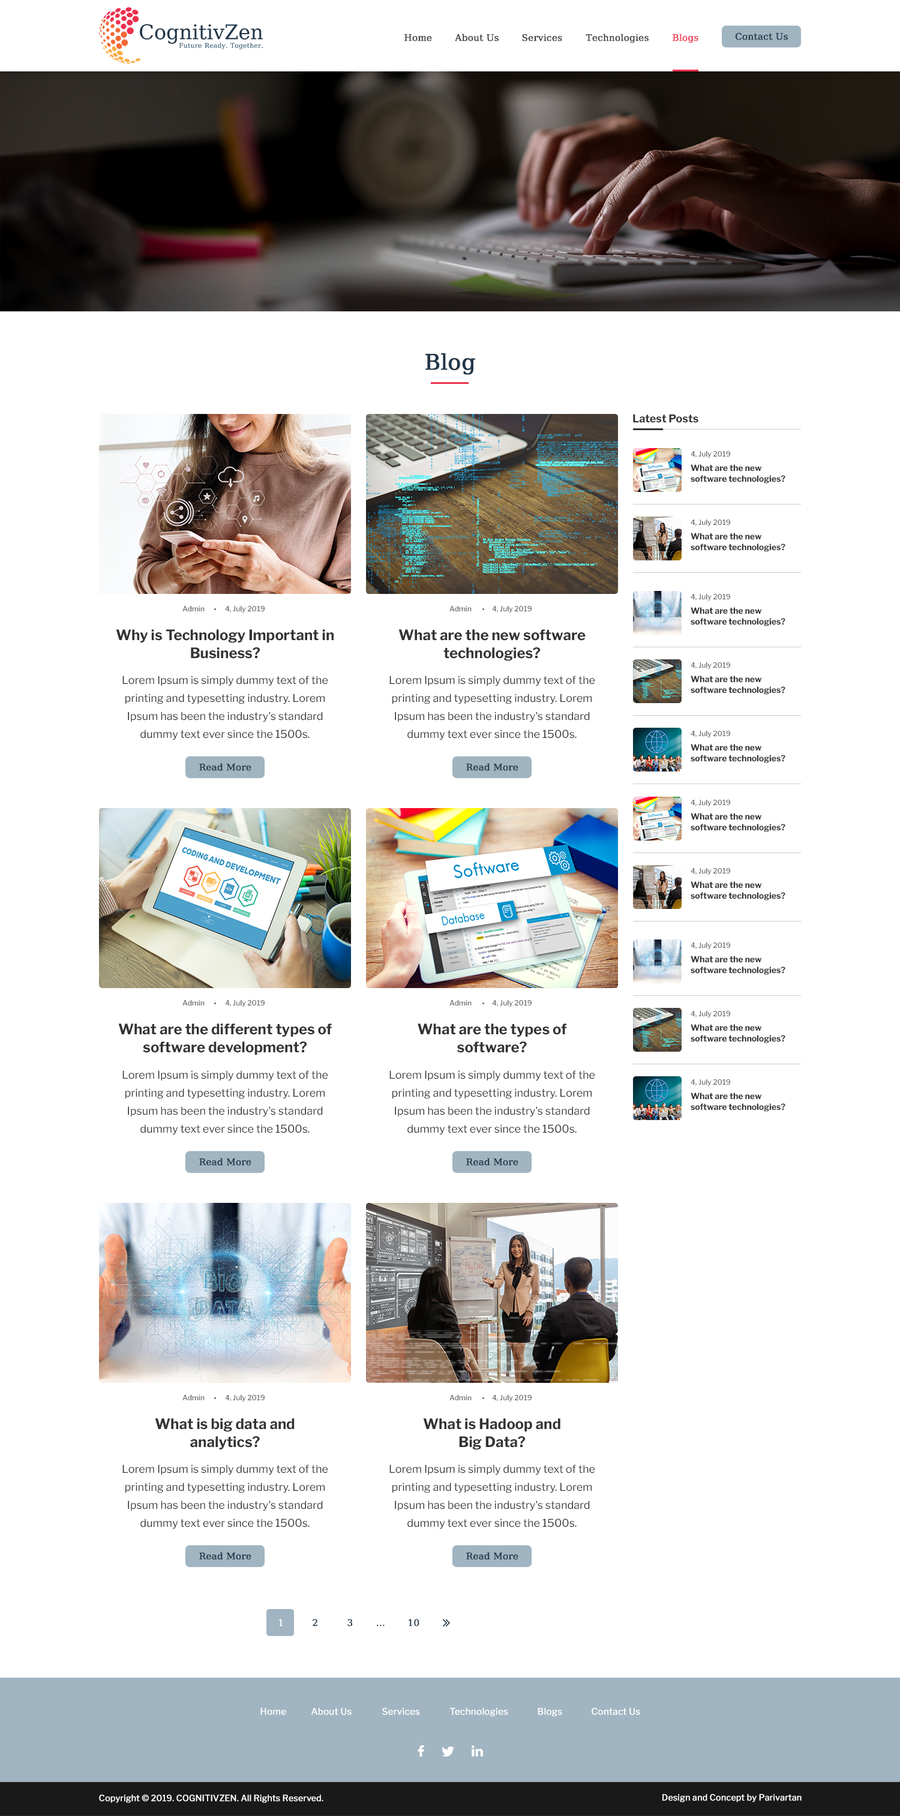
<style>
.page{position:relative;width:900px;height:1816px;background:#ffffff}
.page>*{position:absolute;margin:0}
.t1{font:9px "DejaVuMathTeXGyre-Regular";color:#3c3c3c;font-weight:bold}
.t2{font:9px "DejaVuMathTeXGyre-Regular";color:#ee334e;font-weight:bold}
.t3{font:9px "DejaVuMathTeXGyre-Regular";color:#223749;font-weight:bold}
.t4{font:21.6px "DejaVuMathTeXGyre-Regular";color:#223749;font-weight:bold}
.t5{font:10.8px "LibreFranklin-Bold";color:#333333}
.t6{font:7.2px "LibreFranklin-Medium";color:#666666}
.t7{font:8.4px/10.8px "LibreFranklin-Bold";color:#333333}
.t8{font:14.4px/18px "LibreFranklin-Bold";color:#333333}
.t9{font:10.8px/18px "LibreFranklin-Regular";color:#333333}
.t10{font:9px "DejaVuMathTeXGyre-Regular";color:#ffffff;font-weight:bold}
.t11{font:9px "LibreFranklin-Regular";color:#ffffff;font-weight:bold}
.t12{font:8.4px "LibreFranklin-Regular";color:#ffffff;font-weight:bold}
</style>
<div class="page">
<p class="t1" style="left:404px;top:34px;width:28px;height:7px">Home</p>
<p class="t1" style="left:455px;top:34px;width:44px;height:7px">About Us</p>
<p class="t1" style="left:522px;top:34px;width:40px;height:7px">Services</p>
<p class="t1" style="left:586px;top:34px;width:63px;height:9px">Technologies</p>
<p class="t2" style="left:673px;top:34px;width:25px;height:9px">Blogs</p>
<p class="t3" style="left:735px;top:32px;width:53px;height:8px">Contact Us</p>
<p class="t4" style="left:425px;top:353px;width:50px;height:22px">Blog</p>
<p class="t5" style="left:633px;top:414px;width:65px;height:9px">Latest Posts</p>
<p class="t6" style="left:691px;top:451px;width:39px;height:7px">4, July 2019</p>
<p class="t7" style="left:691px;top:464px;width:94px;height:20px">What are the new software technologies?</p>
<p class="t6" style="left:691px;top:520px;width:39px;height:6px">4, July 2019</p>
<p class="t7" style="left:691px;top:533px;width:94px;height:19px">What are the new software technologies?</p>
<p class="t6" style="left:182px;top:606px;width:23px;height:5px">Admin</p>
<p class="t6" style="left:225px;top:606px;width:40px;height:7px">4, July 2019</p>
<p class="t6" style="left:449px;top:606px;width:23px;height:5px">Admin</p>
<p class="t6" style="left:492px;top:606px;width:40px;height:7px">4, July 2019</p>
<p class="t6" style="left:691px;top:594px;width:39px;height:7px">4, July 2019</p>
<p class="t7" style="left:691px;top:607px;width:94px;height:19px">What are the new software technologies?</p>
<p class="t8" style="left:116px;top:629px;width:218px;height:30px;text-align:center">Why is Technology Important in Business?</p>
<p class="t8" style="left:398px;top:629px;width:188px;height:32px;text-align:center">What are the new software technologies?</p>
<p class="t6" style="left:691px;top:662px;width:39px;height:7px">4, July 2019</p>
<p class="t9" style="left:122px;top:676px;width:206px;height:64px;text-align:center">Lorem Ipsum is simply dummy text of the printing and typesetting industry. Lorem Ipsum has been the industry's standard dummy text ever since the 1500s.</p>
<p class="t9" style="left:389px;top:676px;width:206px;height:64px;text-align:center">Lorem Ipsum is simply dummy text of the printing and typesetting industry. Lorem Ipsum has been the industry's standard dummy text ever since the 1500s.</p>
<p class="t7" style="left:691px;top:676px;width:94px;height:19px">What are the new software technologies?</p>
<p class="t6" style="left:691px;top:731px;width:39px;height:6px">4, July 2019</p>
<p class="t7" style="left:691px;top:744px;width:94px;height:19px">What are the new software technologies?</p>
<p class="t3" style="left:199px;top:763px;width:52px;height:8px">Read More</p>
<p class="t3" style="left:466px;top:763px;width:52px;height:8px">Read More</p>
<p class="t6" style="left:691px;top:800px;width:39px;height:6px">4, July 2019</p>
<p class="t7" style="left:691px;top:813px;width:94px;height:19px">What are the new software technologies?</p>
<p class="t6" style="left:691px;top:868px;width:39px;height:7px">4, July 2019</p>
<p class="t7" style="left:691px;top:881px;width:94px;height:20px">What are the new software technologies?</p>
<p class="t6" style="left:691px;top:943px;width:39px;height:6px">4, July 2019</p>
<p class="t7" style="left:691px;top:956px;width:94px;height:19px">What are the new software technologies?</p>
<p class="t6" style="left:182px;top:1000px;width:23px;height:6px">Admin</p>
<p class="t6" style="left:225px;top:1000px;width:40px;height:7px">4, July 2019</p>
<p class="t6" style="left:449px;top:1000px;width:23px;height:6px">Admin</p>
<p class="t6" style="left:492px;top:1000px;width:40px;height:7px">4, July 2019</p>
<p class="t6" style="left:691px;top:1011px;width:39px;height:7px">4, July 2019</p>
<p class="t8" style="left:118px;top:1024px;width:214px;height:31px;text-align:center">What are the different types of software development?</p>
<p class="t8" style="left:418px;top:1024px;width:149px;height:29px;text-align:center">What are the types of<br>software?</p>
<p class="t7" style="left:691px;top:1024px;width:94px;height:19px">What are the new software technologies?</p>
<p class="t9" style="left:122px;top:1070px;width:206px;height:65px;text-align:center">Lorem Ipsum is simply dummy text of the printing and typesetting industry. Lorem Ipsum has been the industry's standard dummy text ever since the 1500s.</p>
<p class="t9" style="left:389px;top:1070px;width:206px;height:65px;text-align:center">Lorem Ipsum is simply dummy text of the printing and typesetting industry. Lorem Ipsum has been the industry's standard dummy text ever since the 1500s.</p>
<p class="t6" style="left:691px;top:1079px;width:39px;height:7px">4, July 2019</p>
<p class="t7" style="left:691px;top:1093px;width:94px;height:19px">What are the new software technologies?</p>
<p class="t3" style="left:199px;top:1158px;width:52px;height:8px">Read More</p>
<p class="t3" style="left:466px;top:1158px;width:52px;height:8px">Read More</p>
<p class="t6" style="left:182px;top:1395px;width:23px;height:5px">Admin</p>
<p class="t6" style="left:225px;top:1395px;width:40px;height:7px">4, July 2019</p>
<p class="t6" style="left:449px;top:1395px;width:23px;height:5px">Admin</p>
<p class="t6" style="left:492px;top:1395px;width:40px;height:7px">4, July 2019</p>
<p class="t8" style="left:155px;top:1418px;width:140px;height:32px;text-align:center">What is big data and<br>analytics?</p>
<p class="t8" style="left:423px;top:1418px;width:137px;height:32px;text-align:center">What is Hadoop and<br>Big Data?</p>
<p class="t9" style="left:122px;top:1465px;width:206px;height:64px;text-align:center">Lorem Ipsum is simply dummy text of the printing and typesetting industry. Lorem Ipsum has been the industry's standard dummy text ever since the 1500s.</p>
<p class="t9" style="left:389px;top:1465px;width:206px;height:64px;text-align:center">Lorem Ipsum is simply dummy text of the printing and typesetting industry. Lorem Ipsum has been the industry's standard dummy text ever since the 1500s.</p>
<p class="t3" style="left:199px;top:1552px;width:52px;height:8px">Read More</p>
<p class="t3" style="left:466px;top:1552px;width:52px;height:8px">Read More</p>
<p class="t10" style="left:279px;top:1619px;width:4px;height:8px">1</p>
<p class="t3" style="left:313px;top:1619px;width:4px;height:8px">2</p>
<p class="t3" style="left:347px;top:1619px;width:6px;height:8px">3</p>
<p class="t3" style="left:377px;top:1625px;width:8px;height:2px">...</p>
<p class="t3" style="left:409px;top:1619px;width:10px;height:8px">10</p>
<p class="t11" style="left:260px;top:1708px;width:26px;height:7px">Home</p>
<p class="t11" style="left:311px;top:1708px;width:41px;height:7px">About Us</p>
<p class="t11" style="left:382px;top:1708px;width:38px;height:7px">Services</p>
<p class="t11" style="left:450px;top:1708px;width:58px;height:9px">Technologies</p>
<p class="t11" style="left:538px;top:1708px;width:24px;height:9px">Blogs</p>
<p class="t11" style="left:592px;top:1708px;width:48px;height:7px">Contact Us</p>
<p class="t12" style="left:99px;top:1795px;width:224px;height:8px">Copyright © 2019. COGNITIVZEN. All Rights Reserved.</p>
<p class="t12" style="left:662px;top:1794px;width:140px;height:8px">Design and Concept by Parivartan</p>
</div>
